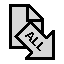
<style>
.page{position:relative;width:64px;height:64px;background:#ffffff}
.page>*{position:absolute;margin:0}
.t1{font:12.7px "NotoSans-Bold";color:#000000}
</style>
<div class="page">
<p class="t1" style="left:25px;top:32px;width:18px;height:19px;rotate:45deg">ALL</p>
</div>
